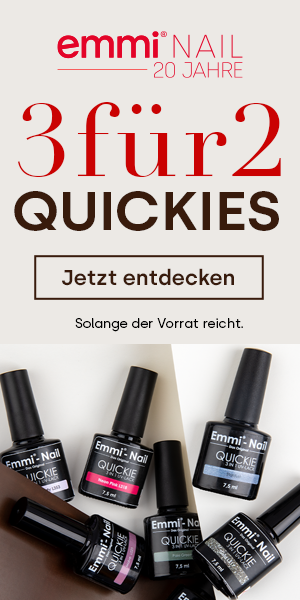
<style>
.page{position:relative;width:300px;height:600px;background:#ece9e5}
.page>*{position:absolute;margin:0}
.t1{font:101.1px "Didot";letter-spacing:0.05em;color:#ca0202;scale:1.04 1}
.t2{font:54.9px "Silka-SemiBold";color:#381b0c;text-transform:uppercase;scale:1.04 1}
.t3{font:21.5px "Silka-SemiBold";color:#381b0c}
.t4{font:13.3px "Silka-Regular";color:#000000}
</style>
<div class="page">
<p class="t1" style="left:17px;top:102px;width:264px;height:75px">3für2</p>
<p class="t2" style="left:14px;top:191px;width:265px;height:40px">Quickies</p>
<p class="t3" style="left:62px;top:268px;width:172px;height:18px">Jetzt entdecken</p>
<p class="t4" style="left:75px;top:318px;width:168px;height:14px">Solange der Vorrat reicht.</p>
</div>
